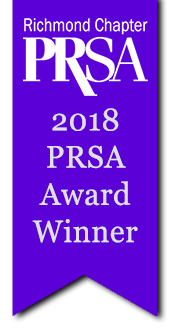
<style>
.page{position:relative;width:172px;height:332px;background:#5b00d7}
.page>*{position:absolute;margin:0}
.t1{font:31px "Georgia";letter-spacing:0.02em;color:#e0e0e0}
</style>
<div class="page">
<p class="t1" style="left:32px;top:108px;width:106px;height:135px;text-align:center">2018<br>PRSA<br>Award<br>Winner</p>
</div>
